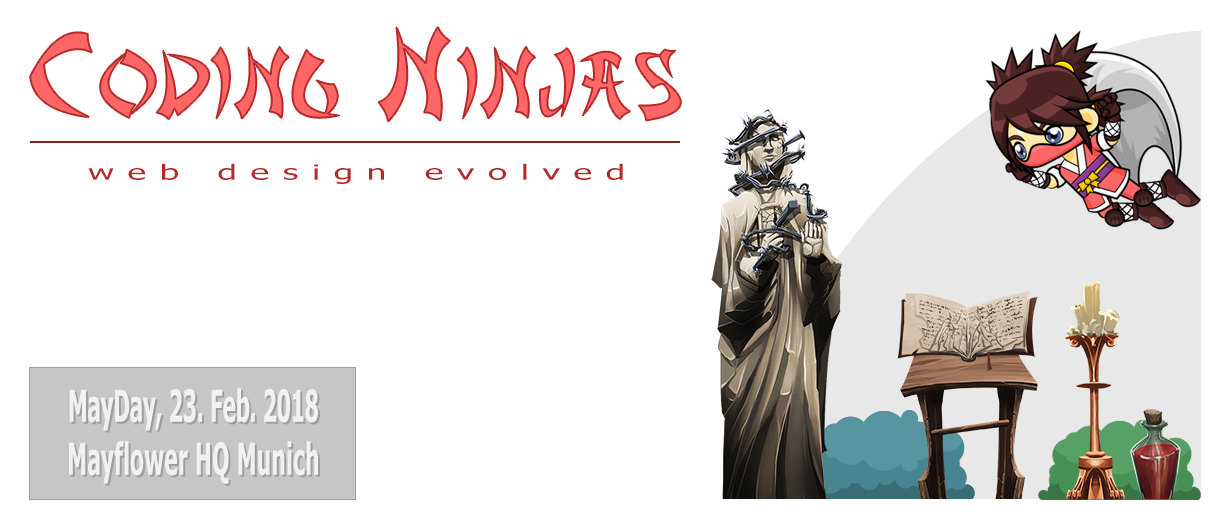
<style>
.page{position:relative;width:1231px;height:529px;background:#ffffff}
.page>*{position:absolute;margin:0}
.t1{font:88.1px "AsianDelight";letter-spacing:0.06em;color:#ff6666;scale:0.93 1}
.t2{font:115.2px "AsianDelight";letter-spacing:0.06em;color:#ff6666;scale:0.93 1}
.t3{font:21px "Tahoma";letter-spacing:0.392em;color:#b82828;scale:1.67 1}
.t4{font:44px/52.9px "Tahoma-Bold";color:#f1f1f1;scale:0.5 1}
.t5{font:44px/52.9px "Tahoma-Bold";letter-spacing:0.025em;color:#f1f1f1;scale:0.5 1}
</style>
<div class="page">
<p class="t1" style="left:30px;top:27px;width:651px;height:95px"><span class="t2">C</span>ODING<span class="t2"> N</span>INJAS</p>
<p class="t3" style="left:88px;top:163px;width:535px;height:21px">web design evolved</p>
<p class="t4" style="left:69px;top:388px;width:249px;height:96px;text-align:center">MayDay, 23. Feb. 2018<br><span class="t5">Mayflower HQ Munich</span></p>
</div>
